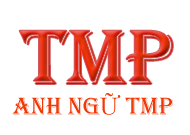
<style>
.page{position:relative;width:190px;height:135px;background:#ffffff}
.page>*{position:absolute;margin:0}
.t1{font:80px "Algerian"}
.t2{font:25px "Algerian";color:#f13908}
.t3{font:25px "TimesNewRomanPSMT";color:#f13908}
</style>
<div class="page">
<p class="t1" style="left:19px;top:30px;width:154px;height:54px">TMP</p>
<p class="t2" style="left:12px;top:93px;width:161px;height:22px">ANH NG<span class="t3">Ữ</span> TMP</p>
</div>
